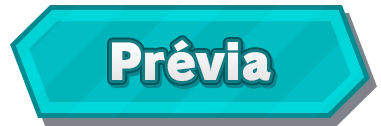
<style>
.page{position:relative;width:381px;height:126px}
.page>*{position:absolute;margin:0}
.t1{font:48.1px "RodinPro-UB";letter-spacing:-0.004em;color:#f0f1f1}
</style>
<div class="page">
<p class="t1" style="left:112px;top:40px;width:159px;height:41px">Prévia</p>
</div>
